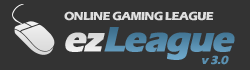
<style>
.page{position:relative;width:250px;height:70px;background:#333333}
.page>*{position:absolute;margin:0}
.t1{font:12px "ErasITC-Bold";letter-spacing:-0.045em;color:#f1f1f1;text-transform:uppercase}
.t2{font:36px "ErasITC-Bold";letter-spacing:-0.045em;color:#5389a9;font-weight:bold;font-style:italic}
.t3{font:36px "ErasITC-Bold";letter-spacing:-0.045em;color:#f1f1f1;font-weight:bold;font-style:italic}
.t4{font:12px "ErasITC-Bold";letter-spacing:-0.045em;color:#5990b1;font-style:italic}
</style>
<div class="page">
<p class="t1" style="left:64px;top:11px;width:150px;height:10px">online gaming league</p>
<p class="t2" style="left:104px;top:27px;width:131px;height:33px">League</p>
<p class="t3" style="left:65px;top:32px;width:40px;height:20px">ez</p>
<p class="t4" style="left:202px;top:55px;width:27px;height:10px">v 3.0</p>
</div>
